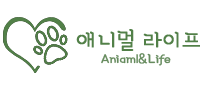
<style>
.page{position:relative;width:200px;height:90px;background:#ffffff}
.page>*{position:absolute;margin:0}
.t1{font:26.7px "BBTreeTR";color:#528048;font-weight:bold}
.t2{font:15.8px "BBTreeTR";color:#668b5e;font-weight:bold}
</style>
<div class="page">
<p class="t1" style="left:76px;top:29px;width:125px;height:22px">애니멀 라이프</p>
<p class="t2" style="left:101px;top:53px;width:70px;height:13px">Aniaml&amp;Life</p>
</div>
